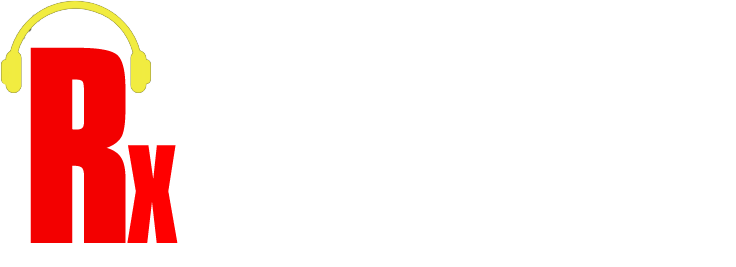
<style>
.page{position:relative;width:736px;height:267px;background:#ffffff}
.page>*{position:absolute;margin:0}
.t1{font:240px "CompactaBT-Bold";color:#f30000}
.t2{font:120px "CompactaBT-Bold";color:#ff0000}
</style>
<div class="page">
<p class="t1" style="left:30px;top:47px;width:96px;height:196px">R</p>
<p class="t2" style="left:127px;top:145px;width:51px;height:98px">X</p>
</div>
